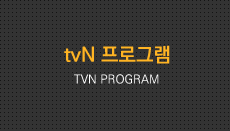
<style>
.page{position:relative;width:230px;height:131px;background:#333333}
.page>*{position:absolute;margin:0}
.t1{font:20px "KoPubDotumBold";color:#ffb423}
.t2{font:12px "KoPubDotumMedium";color:#ffffff}
</style>
<div class="page">
<p class="t1" style="left:64px;top:45px;width:106px;height:19px">tvN 프로그램</p>
<p class="t2" style="left:74px;top:74px;width:85px;height:10px">TVN PROGRAM</p>
</div>
